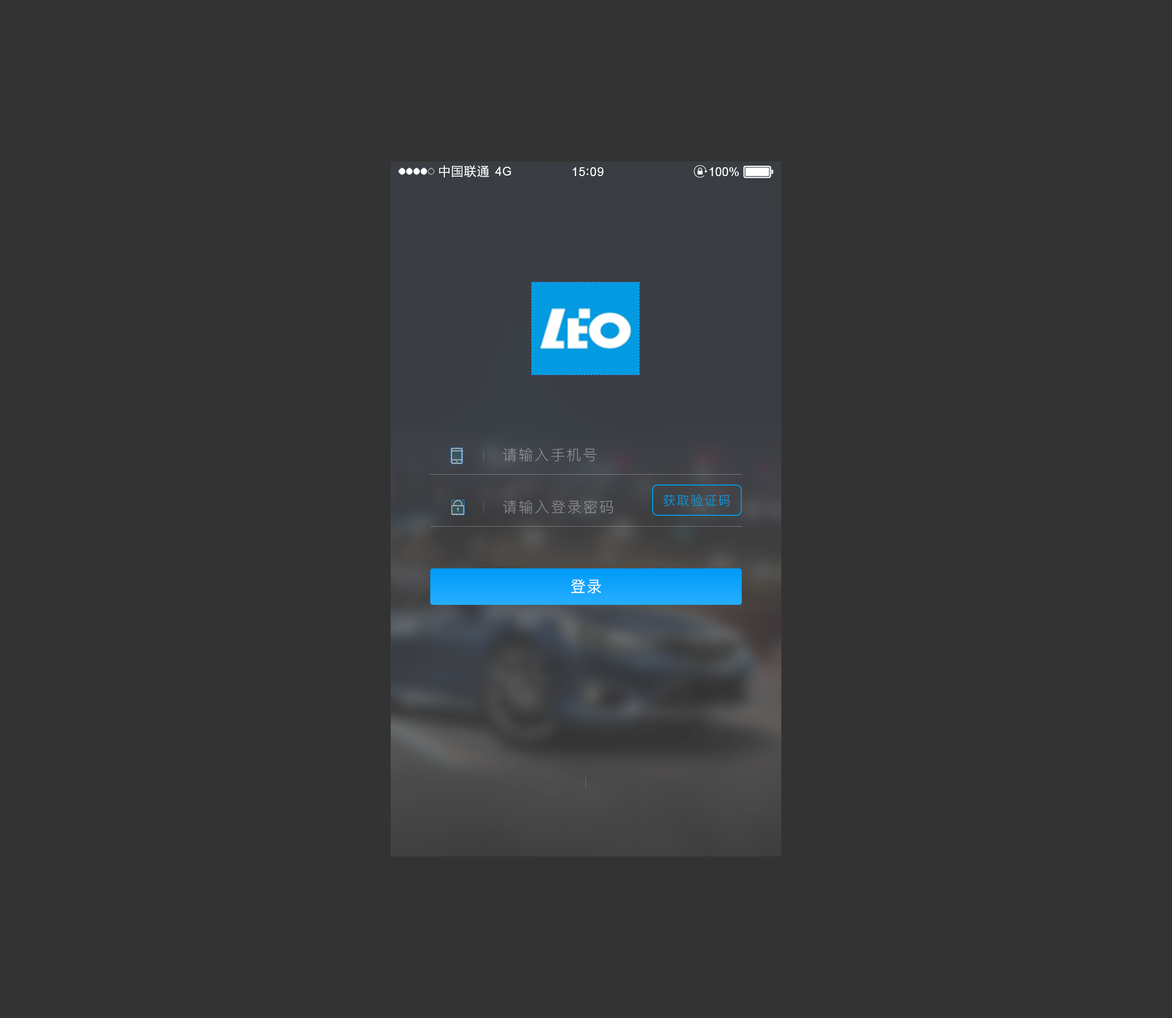
<style>
.page{position:relative;width:1172px;height:1018px;background:#333333}
.page>*{position:absolute;margin:0}
.t1{font:12.2px "MicrosoftYaHei";letter-spacing:0.06em;color:#ffffff}
.t2{font:12.2px "ArialMT";letter-spacing:0.02em;color:#ffffff}
.t3{font:12.2px "ArialMT";letter-spacing:0.04em;color:#ffffff}
.t4{font:12.2px "ArialMT";color:#ffffff}
.t5{font:14.6px "PingFang-SC-Regular";letter-spacing:0.1em;color:#8b8d90}
.t6{font:12.5px "PingFang-SC-Regular";letter-spacing:0.1em;color:#029be2}
.t7{font:14.6px "PingFang-SC-Regular";letter-spacing:0.1em;color:#8b8c8e}
.t8{font:15.6px "PingFang-SC-Medium";letter-spacing:0.05em;color:#ffffff}
</style>
<div class="page">
<p class="t1" style="left:439px;top:165px;width:50px;height:13px">中国联通</p>
<p class="t2" style="left:495px;top:167px;width:16px;height:9px">4G</p>
<p class="t3" style="left:572px;top:167px;width:32px;height:9px">15 09</p>
<p class="t4" style="left:709px;top:167px;width:30px;height:9px">100%</p>
<p class="t5" style="left:503px;top:448px;width:93px;height:13px">请输入手机号</p>
<p class="t6" style="left:663px;top:494px;width:67px;height:12px">获取验证码</p>
<p class="t7" style="left:503px;top:500px;width:110px;height:13px">请输入登录密码</p>
<p class="t8" style="left:571px;top:579px;width:30px;height:14px">登录</p>
</div>
